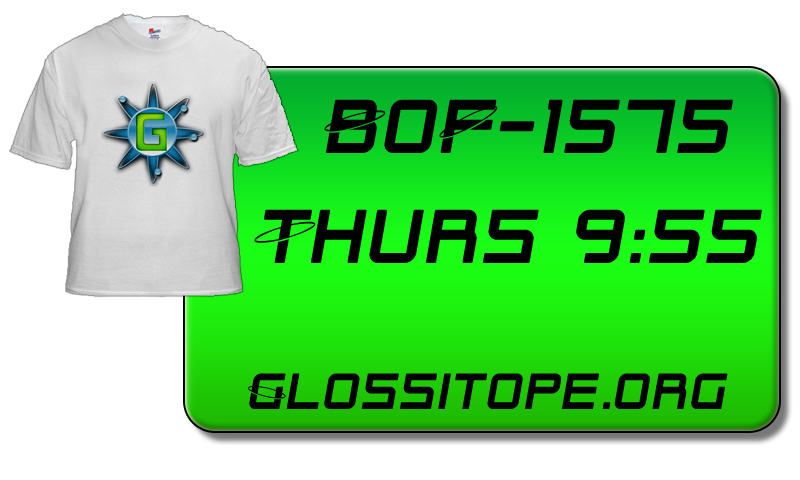
<style>
.page{position:relative;width:800px;height:480px;background:#ffffff}
.page>*{position:absolute;margin:0}
.t1{font:80px "SFOuterLimits";letter-spacing:0.05em;color:#000000}
.t2{font:53.3px "SFOuterLimits";letter-spacing:0.05em;color:#000000}
</style>
<div class="page">
<p class="t1" style="left:324px;top:99px;width:409px;height:54px">BoF-1575</p>
<p class="t1" style="left:254px;top:209px;width:508px;height:54px">Thurs 9:55</p>
<p class="t2" style="left:248px;top:373px;width:480px;height:36px">Glossitope.org</p>
</div>
